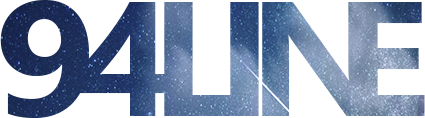
<style>
.page{position:relative;width:425px;height:118px;background:#ffffff}
.page>*{position:absolute;margin:0}
.t1{font:162.5px "Leelawadee-Bold";letter-spacing:-0.14em;scale:1.1 1}
.t2{font:162.5px "Leelawadee-Bold";letter-spacing:-0.3em;scale:1.1 1}
</style>
<div class="page">
<p class="t1" style="left:0px;top:0px;width:425px;height:118px">94LI<span class="t2">NE</span></p>
</div>
